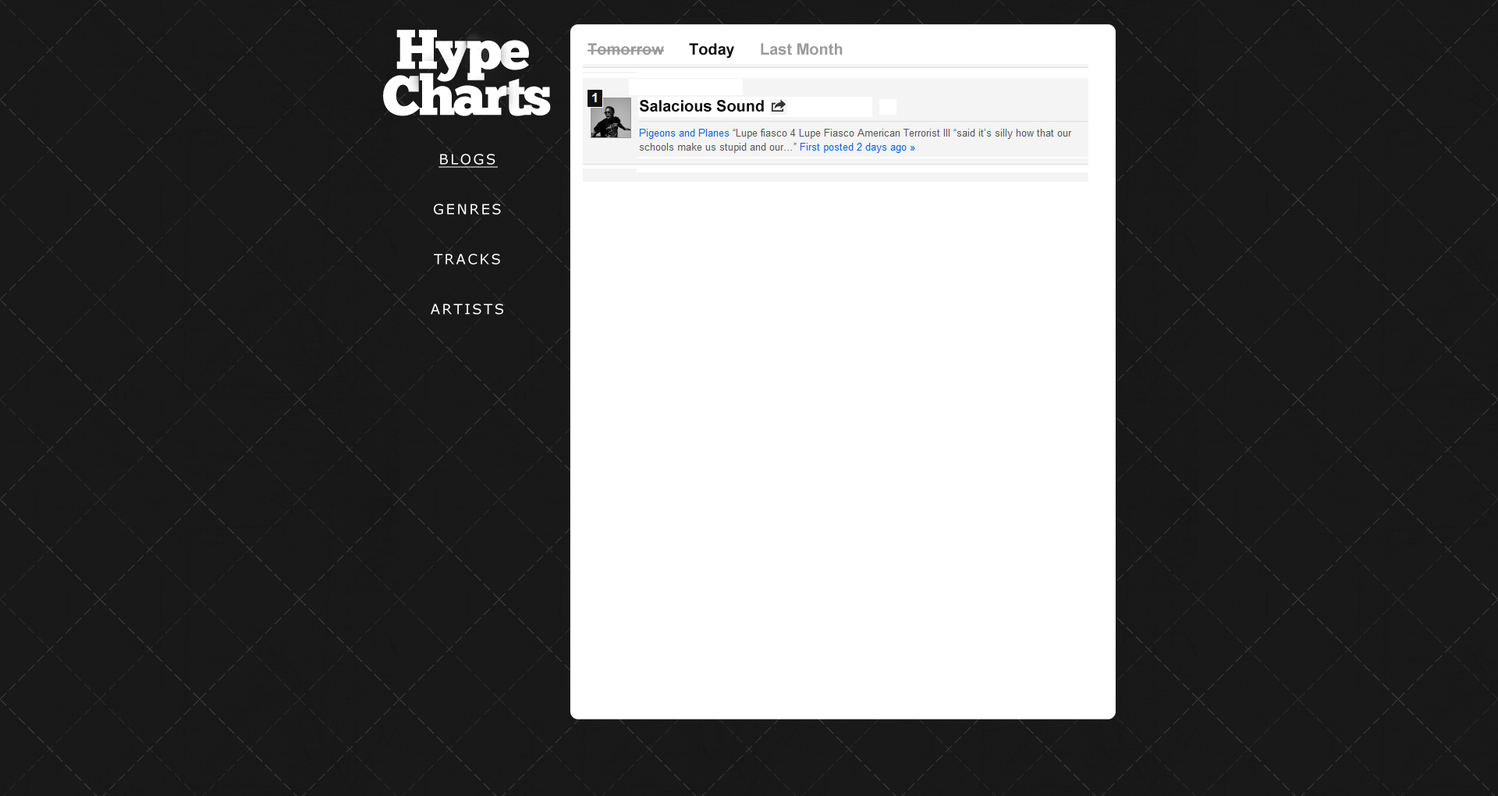
<style>
.page{position:relative;width:1498px;height:796px;background:#191919}
.page>*{position:absolute;margin:0}
.t1{font:15.6px "Arial-BoldMT";color:#9b9b9b}
.t2{font:15.6px "Arial-BoldMT";color:#111111}
.t3{font:14.1px/49.9px "Verdana";letter-spacing:0.14em;color:#ffffff;text-transform:uppercase}
.t4{font:14.1px/49.9px "Verdana";letter-spacing:0.14em;color:#ffffff;text-transform:uppercase;text-decoration:underline}
</style>
<div class="page">
<p class="t1" style="left:588px;top:43px;width:76px;height:12px">Tomorrow</p>
<p class="t2" style="left:689px;top:43px;width:45px;height:16px">Today</p>
<p class="t1" style="left:761px;top:43px;width:82px;height:12px">Last Month</p>
<p class="t2" style="left:640px;top:100px;width:124px;height:12px">Salacious Sound</p>
<p class="t3" style="left:431px;top:154px;width:72px;height:160px;text-align:center"><span class="t4">BLOGS<br></span>genres<br>tracks<br>artists</p>
</div>
